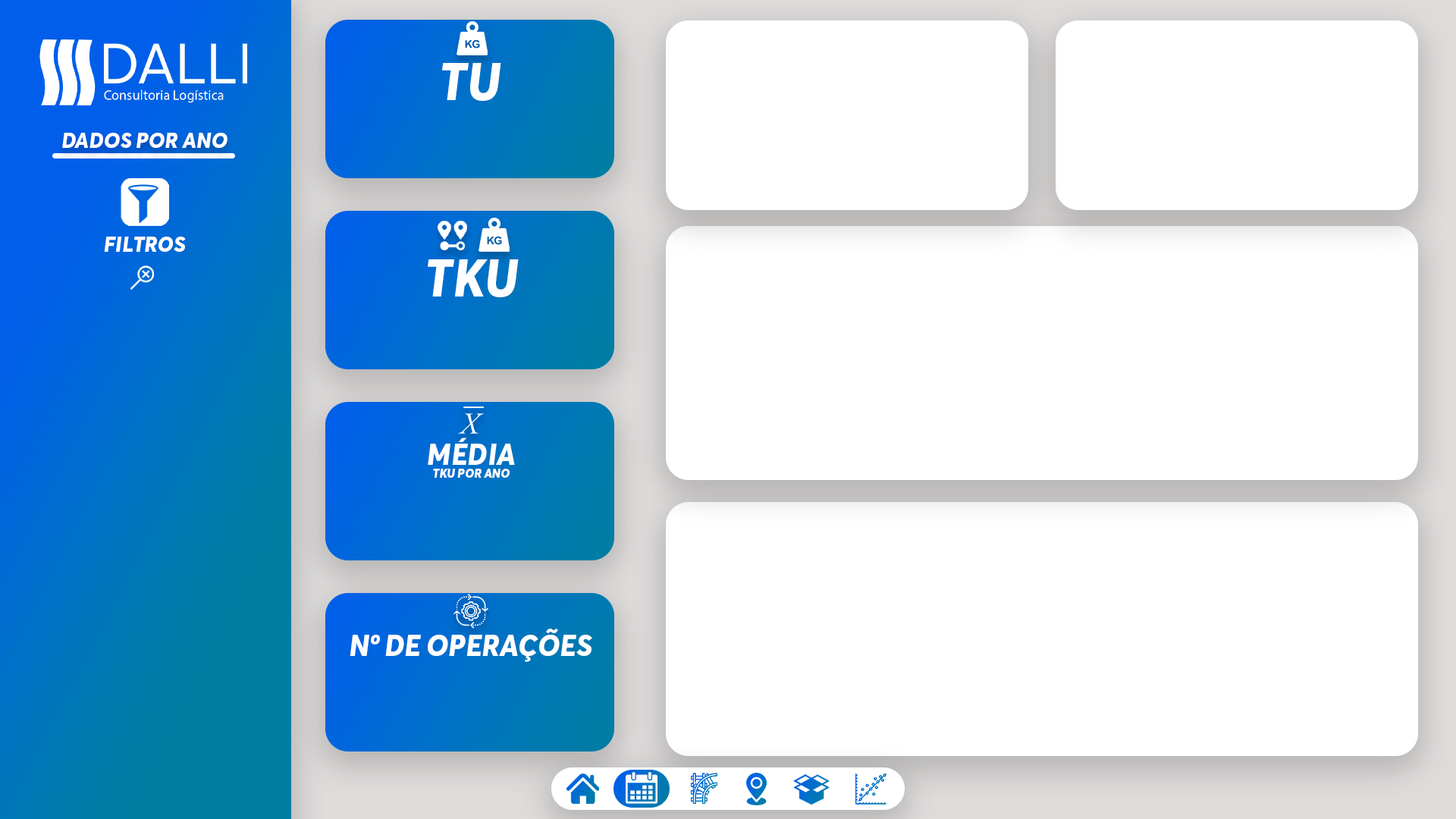
<style>
.page{position:relative;width:1456px;height:819px;background:#ffffff}
.page>*{position:absolute;margin:0}
.t1{font:52.1px "AvertaDemoPE-ExtraboldItalic";color:#ffffff;text-transform:uppercase}
.t2{font:22.1px "AvertaDemoPE-ExtraboldItalic";color:#ffffff;text-transform:uppercase}
.t3{font:12.6px/12.6px "AvertaDemoPE-ExtraboldItalic";color:#ffffff;text-transform:uppercase}
.t4{font:30px/12.6px "AvertaDemoPE-ExtraboldItalic";color:#ffffff;text-transform:uppercase}
.t5{font:30px/12.6px "AvertaDemoPE-ExtraboldItalic";color:#ffffff}
.t6{font:30px "AvertaDemoPE-ExtraboldItalic";color:#ffffff;text-transform:uppercase}
</style>
<div class="page">
<p class="t1" style="left:442px;top:63px;width:59px;height:38px">tu</p>
<p class="t2" style="left:62px;top:133px;width:165px;height:15px">dados por ano</p>
<p class="t2" style="left:104px;top:237px;width:82px;height:15px">filtros</p>
<p class="t1" style="left:428px;top:259px;width:91px;height:38px">tku</p>
<p class="t3" style="left:428px;top:438px;width:87px;height:40px;text-align:center"><span class="t4">méd</span><span class="t5">I</span><span class="t4">a<br></span>TKU por ano</p>
<p class="t6" style="left:350px;top:629px;width:242px;height:33px">nº de operações</p>
</div>
